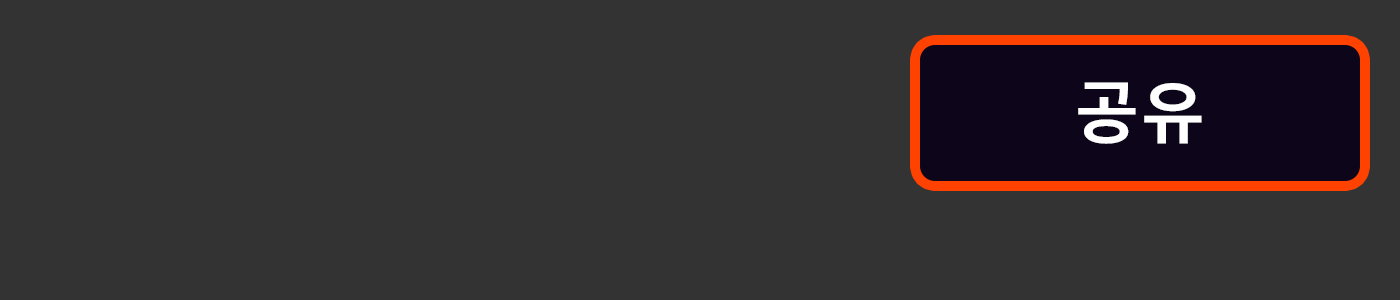
<style>
.page{position:relative;width:1400px;height:300px;background:#333333}
.page>*{position:absolute;margin:0}
.t1{font:71.4px "AppleSDGothicNeoB00";letter-spacing:0.06em;color:#ffffff}
</style>
<div class="page">
<p class="t1" style="left:1078px;top:82px;width:124px;height:62px">공유</p>
</div>
